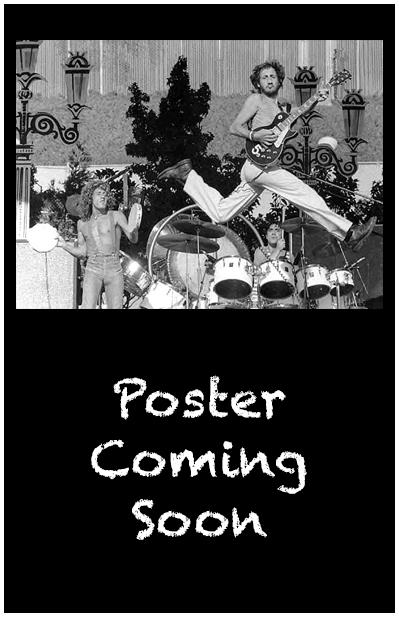
<style>
.page{position:relative;width:399px;height:617px;background:#000000}
.page>*{position:absolute;margin:0}
.t1{font:12px "Chalkduster";color:#ffffff}
</style>
<div class="page">
<p class="t1" style="left:91px;top:375px;width:216px;height:165px;text-align:center">Poster<br>Coming<br>Soon</p>
</div>
